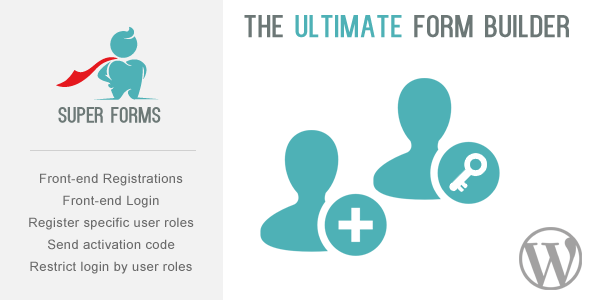
<style>
.page{position:relative;width:590px;height:300px;background:#ffffff}
.page>*{position:absolute;margin:0}
.t1{font:31.7px "Kenzo";letter-spacing:0.025em;color:#6c7776}
.t2{font:31.7px "Kenzo";letter-spacing:0.025em;color:#4eb1b6}
.t3{font:13.1px/22px "ArialMT";letter-spacing:0.025em;color:#6a6a6a}
</style>
<div class="page">
<p class="t1" style="left:244px;top:15px;width:325px;height:23px">The <span class="t2">ultimate</span> form builder</p>
<p class="t3" style="left:29px;top:173px;width:165px;height:101px;text-align:center">Front-end Registrations<br>Front-end Login<br>Register specific user roles<br>Send activation code<br>Restrict login by user roles</p>
</div>
